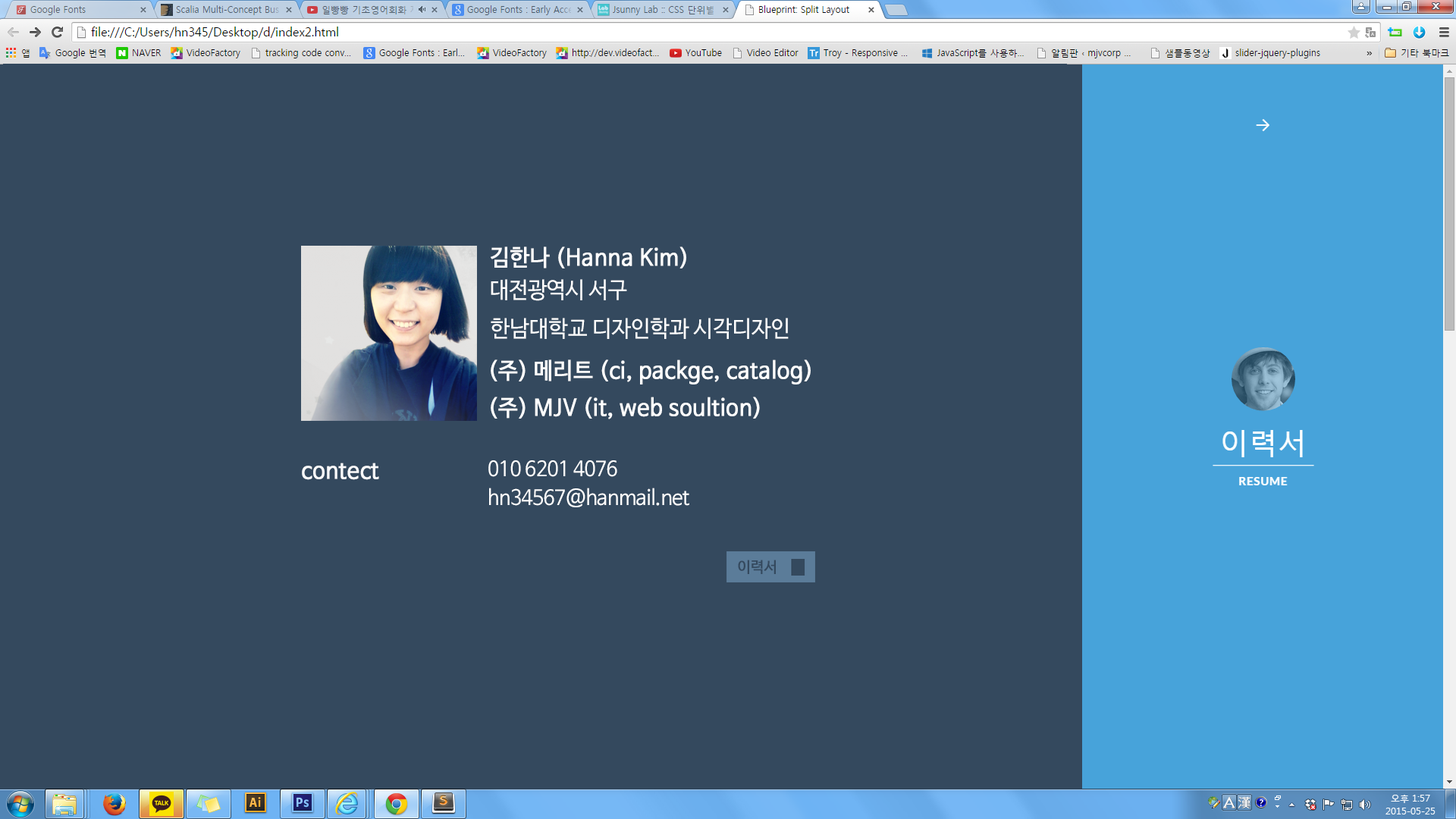
<style>
.page{position:relative;width:1456px;height:819px;background:#34495e}
.page>*{position:absolute;margin:0}
.t1{font:22.8px "NanumBarunGothic";color:#ffffff;font-weight:bold;scale:0.95 1}
.t2{font:22.8px/32px "NanumBarunGothic";letter-spacing:-0.02em;color:#ffffff;scale:0.95 1}
.t3{font:22.8px "NanumBarunGothic";color:#ffffff;scale:0.95 1}
.t4{font:22.8px/36.5px "NanumBarunGothic";color:#ffffff;font-weight:bold;scale:0.95 1}
.t5{font:20.7px/28.9px "NanumBarunGothic";letter-spacing:-0.02em;color:#ffffff;scale:0.95 1}
.t6{font:22.8px "NanumBarunGothic";color:#fbfbfc;font-weight:bold;scale:0.95 1}
.t7{font:15.2px "NanumBarunGothic";color:#34495e;font-weight:bold;scale:0.95 1}
</style>
<div class="page">
<p class="t1" style="left:491px;top:246px;width:195px;height:55px">김한나 (Hanna Kim) <br><span class="t2">대전광역시 서구</span></p>
<p class="t3" style="left:491px;top:318px;width:298px;height:21px">한남대학교 디자인학과 시각디자인</p>
<p class="t4" style="left:491px;top:359px;width:320px;height:60px">(주) 메리트 (ci, packge, catalog)  <br>(주) MJV (it, web soultion)</p>
<p class="t5" style="left:488px;top:460px;width:201px;height:47px">010 6201 4076<br>hn34567@hanmail.net</p>
<p class="t6" style="left:302px;top:463px;width:77px;height:17px">contect</p>
<p class="t7" style="left:738px;top:560px;width:38px;height:14px">이력서</p>
</div>
